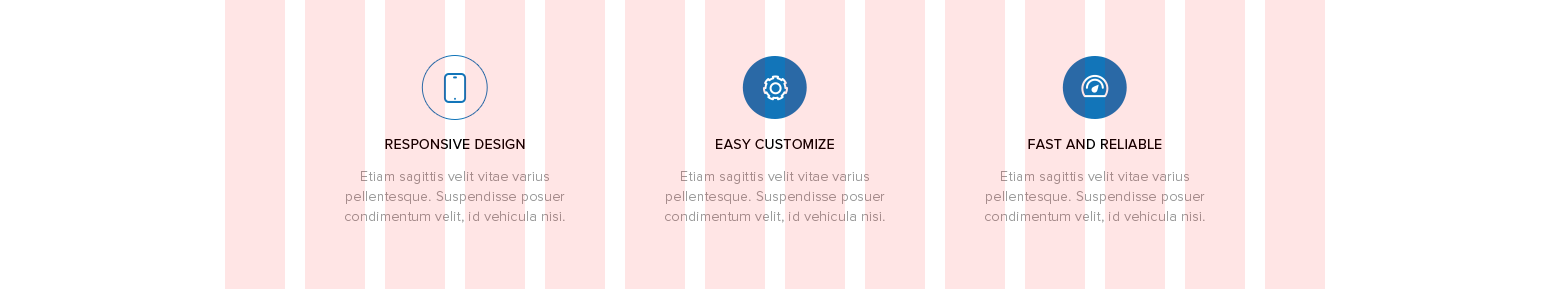
<style>
.page{position:relative;width:1550px;height:289px;background:#ffe5e5}
.page>*{position:absolute;margin:0}
.t1{font:14px "ProximaNova-Regular";letter-spacing:0.025em;color:#1a0000;text-transform:uppercase}
.t2{font:14px/20px "ProximaNova-Light";letter-spacing:0.025em;color:#9d9d9d}
</style>
<div class="page">
<p class="t1" style="left:385px;top:139px;width:140px;height:10px">Responsive Design</p>
<p class="t1" style="left:716px;top:139px;width:118px;height:10px">Easy Customize</p>
<p class="t1" style="left:1028px;top:139px;width:134px;height:10px">Fast and reliable</p>
<p class="t2" style="left:345px;top:171px;width:220px;height:52px;text-align:center">Etiam sagittis velit vitae varius pellentesque. Suspendisse posuer condimentum velit, id vehicula nisi.</p>
<p class="t2" style="left:665px;top:171px;width:220px;height:52px;text-align:center">Etiam sagittis velit vitae varius pellentesque. Suspendisse posuer condimentum velit, id vehicula nisi.</p>
<p class="t2" style="left:985px;top:171px;width:220px;height:52px;text-align:center">Etiam sagittis velit vitae varius pellentesque. Suspendisse posuer condimentum velit, id vehicula nisi.</p>
</div>
